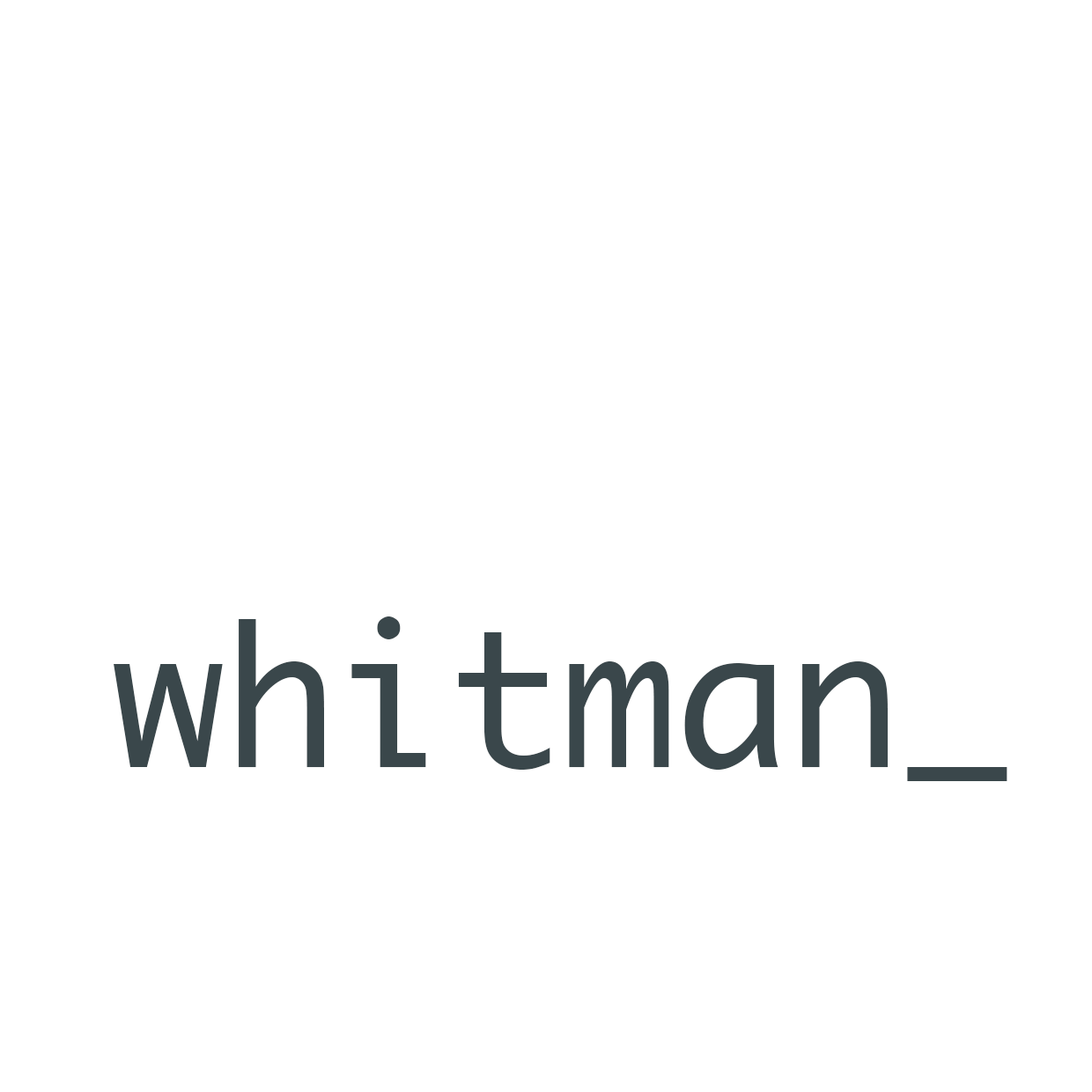
<style>
.page{position:relative;width:1092px;height:1092px;background:#ffffff}
.page>*{position:absolute;margin:0}
.t1{font:187.9px "Monaco";color:#3a474b}
</style>
<div class="page">
<p class="t1" style="left:114px;top:616px;width:893px;height:165px">whitman_</p>
</div>
